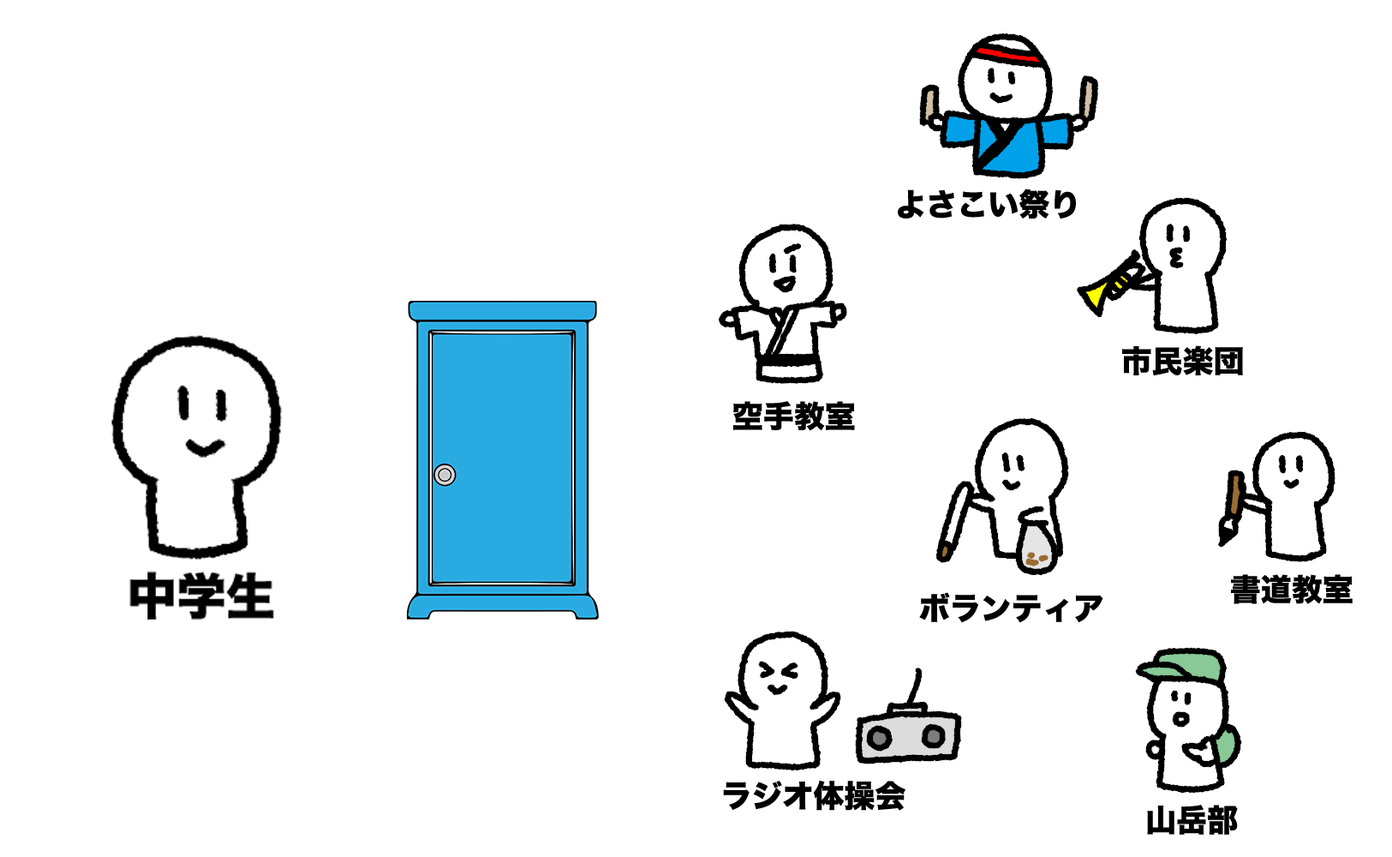
<style>
.page{position:relative;width:1392px;height:857px;background:#ffffff}
.page>*{position:absolute;margin:0}
.t1{font:30.8px "HiraKakuStd-W8";color:#000000}
</style>
<div class="page">
<p class="t1" style="left:898px;top:188px;width:178px;height:30px">よさこい祭り</p>
<p class="t1" style="left:1122px;top:345px;width:121px;height:31px">市民楽団</p>
<p class="t1" style="left:733px;top:401px;width:122px;height:30px">空手教室</p>
<p class="t1" style="left:1231px;top:574px;width:122px;height:30px">書道教室</p>
<p class="t1" style="left:919px;top:592px;width:184px;height:31px">ボランティア</p>
<p class="t1" style="left:723px;top:780px;width:182px;height:30px">ラジオ体操会</p>
<p class="t1" style="left:1147px;top:804px;width:91px;height:30px">山岳部</p>
</div>
